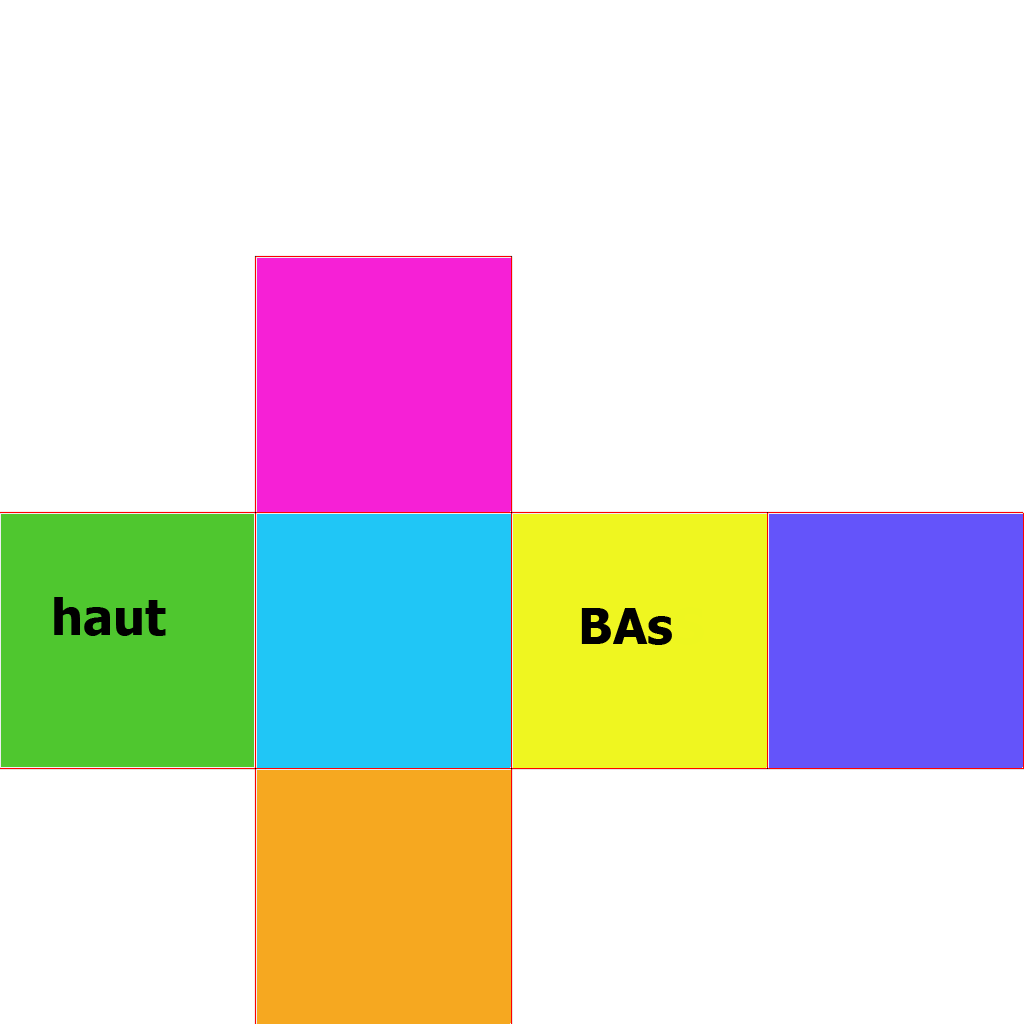
<style>
.page{position:relative;width:1024px;height:1024px;background:#ffffff}
.page>*{position:absolute;margin:0}
.t1{font:50px "Tahoma-Bold";color:#000000}
.t2{font:50px "Tahoma-Bold";color:#eef620}
</style>
<div class="page">
<p class="t1" style="left:54px;top:597px;width:112px;height:39px">haut</p>
<p class="t1" style="left:581px;top:607px;width:123px;height:38px">BAs<span class="t2">S</span></p>
</div>
